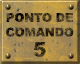
<style>
.page{position:relative;width:80px;height:64px}
.page>*{position:absolute;margin:0}
.t1{font:12px/14.7px "Arial-Black";letter-spacing:-0.015em;text-transform:uppercase}
.t2{font:20px/20px "Arial-Black";letter-spacing:-0.055em;text-transform:uppercase}
</style>
<div class="page">
<p class="t1" style="left:6px;top:13px;width:68px;height:44px;text-align:center">Ponto de<br>comando<br><span class="t2">5</span></p>
</div>
